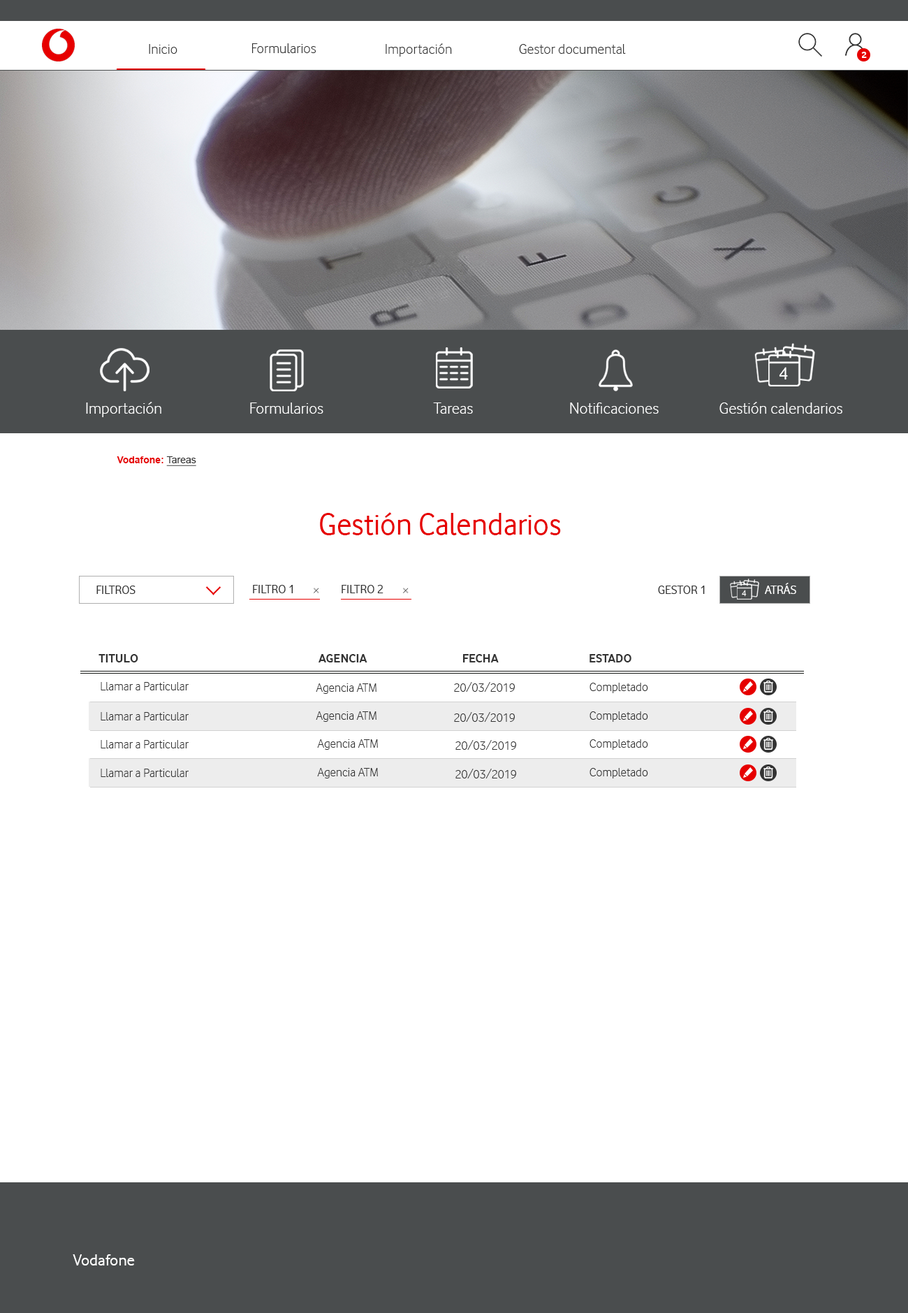
<style>
.page{position:relative;width:908px;height:1313px;background:#ffffff}
.page>*{position:absolute;margin:0}
.t1{font:14.7px "VodafoneLt-Regular";color:#333333}
.t2{font:9.8px "VodafoneRg-Bold";color:#ffffff}
.t3{font:18.2px "VodafoneRg-Regular";color:#ffffff}
.t4{font:16.8px "VodafoneLt-Regular";color:#ffffff}
.t5{font:9.8px "Arial-BoldMT";color:#e60000}
.t6{font:9.8px "ArialMT";color:#333333;text-decoration:underline}
.t7{font:31.4px "VodafoneRg-Regular";color:#e60000}
.t8{font:12.6px "VodafoneRg-Regular";color:#333333}
.t9{font:8.8px "VodafoneRg-Regular";color:#ffffff}
.t10{font:12.6px "VodafoneRg-Regular";color:#ffffff}
.t11{font:12.6px "VodafoneRg-Bold";color:#333333}
.t12{font:12.6px "VodafoneLt-Regular";color:#333333}
.t13{font:16.8px "VodafoneRg-Regular";color:#ffffff}
</style>
<div class="page">
<p class="t1" style="left:149px;top:44px;width:28px;height:10px">Inicio</p>
<p class="t1" style="left:252px;top:43px;width:65px;height:10px">Formularios</p>
<p class="t1" style="left:386px;top:43px;width:66px;height:14px">Importación</p>
<p class="t1" style="left:519px;top:44px;width:107px;height:10px">Gestor documental</p>
<p class="t2" style="left:861px;top:52px;width:6px;height:6px">2</p>
<p class="t3" style="left:779px;top:367px;width:9px;height:13px">4</p>
<p class="t4" style="left:86px;top:402px;width:75px;height:15px">Importación</p>
<p class="t4" style="left:720px;top:402px;width:123px;height:12px">Gestión calendarios</p>
<p class="t4" style="left:250px;top:402px;width:73px;height:12px">Formularios</p>
<p class="t4" style="left:433px;top:402px;width:40px;height:12px">Tareas</p>
<p class="t4" style="left:570px;top:402px;width:89px;height:12px">Notificaciones</p>
<p class="t5" style="left:117px;top:456px;width:79px;height:10px">Vodafone: <span class="t6">Tareas</span></p>
<p class="t7" style="left:320px;top:512px;width:241px;height:23px">Gestión Calendarios</p>
<p class="t8" style="left:96px;top:585px;width:40px;height:9px">FILTROS</p>
<p class="t8" style="left:253px;top:585px;width:40px;height:8px">FILTRO 1</p>
<p class="t8" style="left:342px;top:585px;width:42px;height:8px">FILTRO 2</p>
<p class="t8" style="left:658px;top:585px;width:47px;height:9px">GESTOR 1</p>
<p class="t9" style="left:742px;top:590px;width:5px;height:7px">4</p>
<p class="t10" style="left:765px;top:583px;width:32px;height:11px">ATRÁS</p>
<p class="t11" style="left:99px;top:654px;width:39px;height:8px">TITULO</p>
<p class="t11" style="left:319px;top:654px;width:49px;height:8px">AGENCIA</p>
<p class="t11" style="left:463px;top:654px;width:36px;height:8px">FECHA</p>
<p class="t11" style="left:590px;top:654px;width:42px;height:8px">ESTADO</p>
<p class="t12" style="left:101px;top:682px;width:88px;height:8px">Llamar a Particular</p>
<p class="t12" style="left:316px;top:683px;width:61px;height:11px">Agencia ATM</p>
<p class="t12" style="left:454px;top:682px;width:61px;height:10px">20/03/2019</p>
<p class="t12" style="left:590px;top:683px;width:58px;height:10px">Completado</p>
<p class="t12" style="left:101px;top:712px;width:88px;height:8px">Llamar a Particular</p>
<p class="t12" style="left:316px;top:711px;width:61px;height:11px">Agencia ATM</p>
<p class="t12" style="left:454px;top:712px;width:61px;height:10px">20/03/2019</p>
<p class="t12" style="left:590px;top:711px;width:58px;height:11px">Completado</p>
<p class="t12" style="left:101px;top:740px;width:88px;height:8px">Llamar a Particular</p>
<p class="t12" style="left:317px;top:739px;width:61px;height:11px">Agencia ATM</p>
<p class="t12" style="left:456px;top:740px;width:60px;height:10px">20/03/2019</p>
<p class="t12" style="left:590px;top:739px;width:58px;height:11px">Completado</p>
<p class="t12" style="left:101px;top:769px;width:88px;height:8px">Llamar a Particular</p>
<p class="t12" style="left:317px;top:768px;width:61px;height:10px">Agencia ATM</p>
<p class="t12" style="left:456px;top:769px;width:60px;height:9px">20/03/2019</p>
<p class="t12" style="left:590px;top:768px;width:58px;height:10px">Completado</p>
<p class="t13" style="left:73px;top:1254px;width:62px;height:11px">Vodafone</p>
</div>
